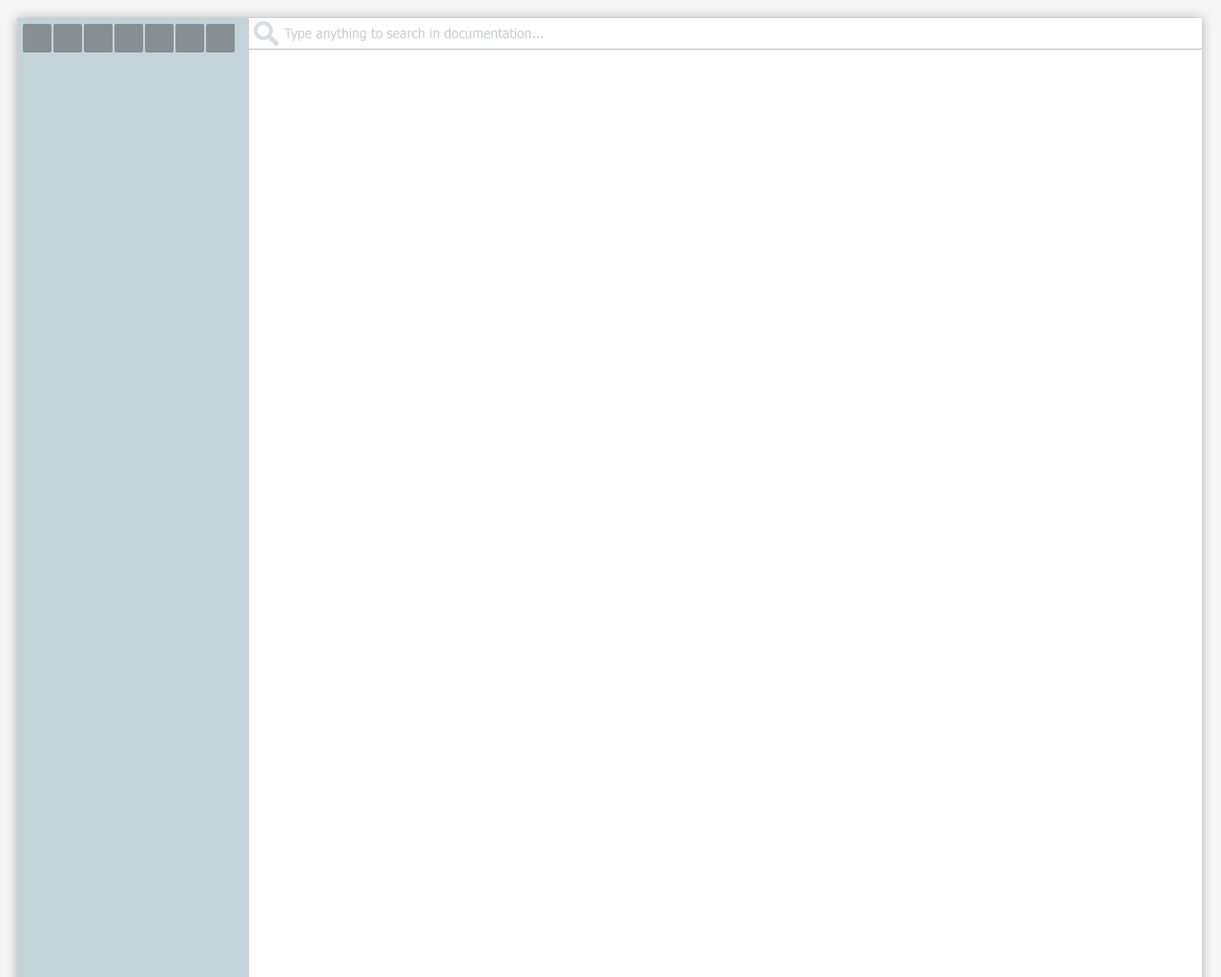
<style>
.page{position:relative;width:1221px;height:977px;background:#ffffff}
.page>*{position:absolute;margin:0}
.t1{font:13.4px "Tahoma";color:#c3ccd0}
</style>
<div class="page">
<p class="t1" style="left:283px;top:28px;width:260px;height:13px">Type anything to search in documentation...</p>
</div>
